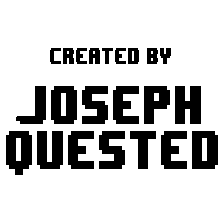
<style>
.page{position:relative;width:224px;height:224px;background:#ffffff}
.page>*{position:absolute;margin:0}
.t1{font:19.2px "8BITWONDERNominal";color:#000000;scale:0.67 1}
.t2{font:46.2px "8BITWONDERNominal";color:#000000;scale:0.67 1}
</style>
<div class="page">
<p class="t1" style="left:50px;top:48px;width:121px;height:16px">created by</p>
<p class="t2" style="left:20px;top:86px;width:181px;height:38px">joseph</p>
<p class="t2" style="left:6px;top:131px;width:212px;height:38px">quested</p>
</div>
